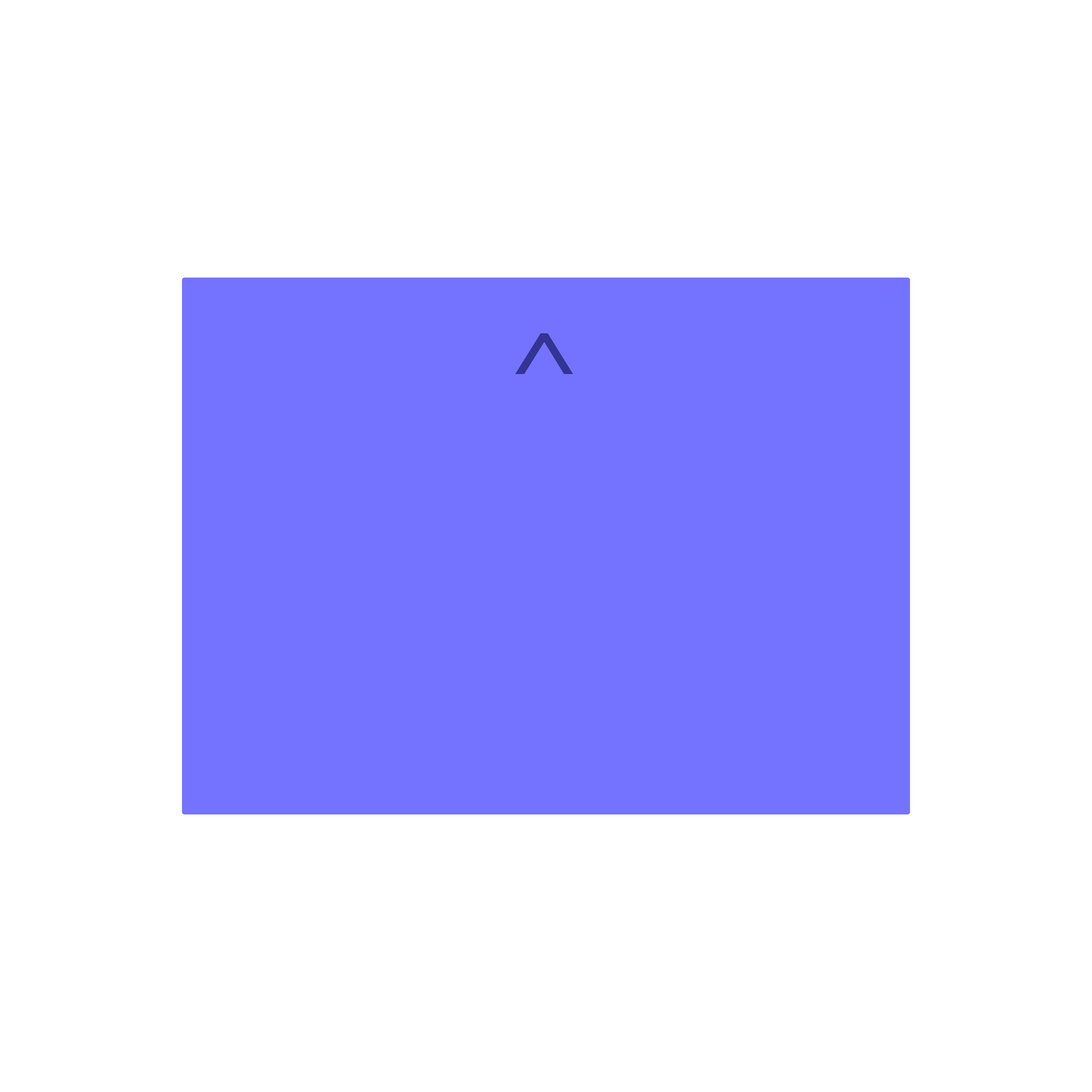
<style>
.page{position:relative;width:1092px;height:1092px;background:#ffffff}
.page>*{position:absolute;margin:0}
.t1{font:126.4px "Georgia";letter-spacing:-0.03em;color:#343493}
</style>
<div class="page">
<p class="t1" style="left:515px;top:333px;width:58px;height:41px">^</p>
</div>
